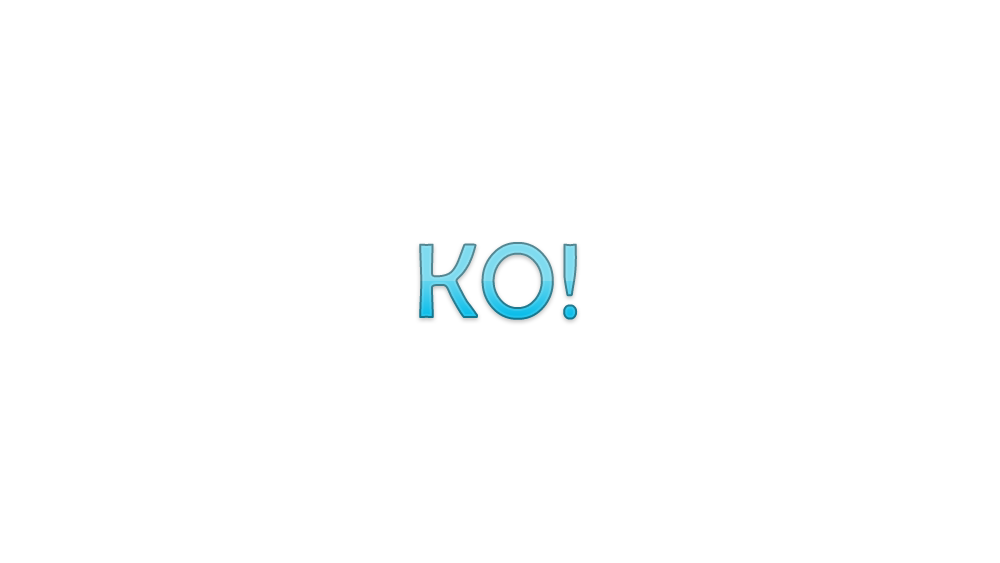
<style>
.page{position:relative;width:1000px;height:563px;background:#ffffff}
.page>*{position:absolute;margin:0}
.t1{font:108.3px "BerlinSansFB-Reg"}
</style>
<div class="page">
<p class="t1" style="left:419px;top:242px;width:159px;height:78px">KO!</p>
</div>
